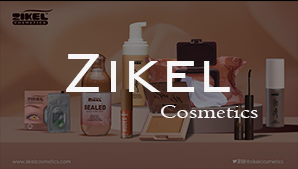
<style>
.page{position:relative;width:298px;height:169px}
.page>*{position:absolute;margin:0}
.t1{font:74.1px "BankGothicBT-Light";letter-spacing:0.01em;color:#f6f6f6;scale:0.85 1}
.t2{font:20.3px "Centaur";letter-spacing:0.01em;color:#f6f6f6;scale:1.28 1}
</style>
<div class="page">
<p class="t1" style="left:66px;top:54px;width:164px;height:38px">Zikel</p>
<p class="t2" style="left:161px;top:105px;width:97px;height:13px">Cosmetics</p>
</div>
